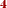
<style>
.page{position:relative;width:7px;height:8px;background:#ffffff}
.page>*{position:absolute;margin:0}
.t1{font:12px "Stencil";color:#9a0101}
</style>
<div class="page">
<p class="t1" style="left:0px;top:0px;width:7px;height:8px">4</p>
</div>
